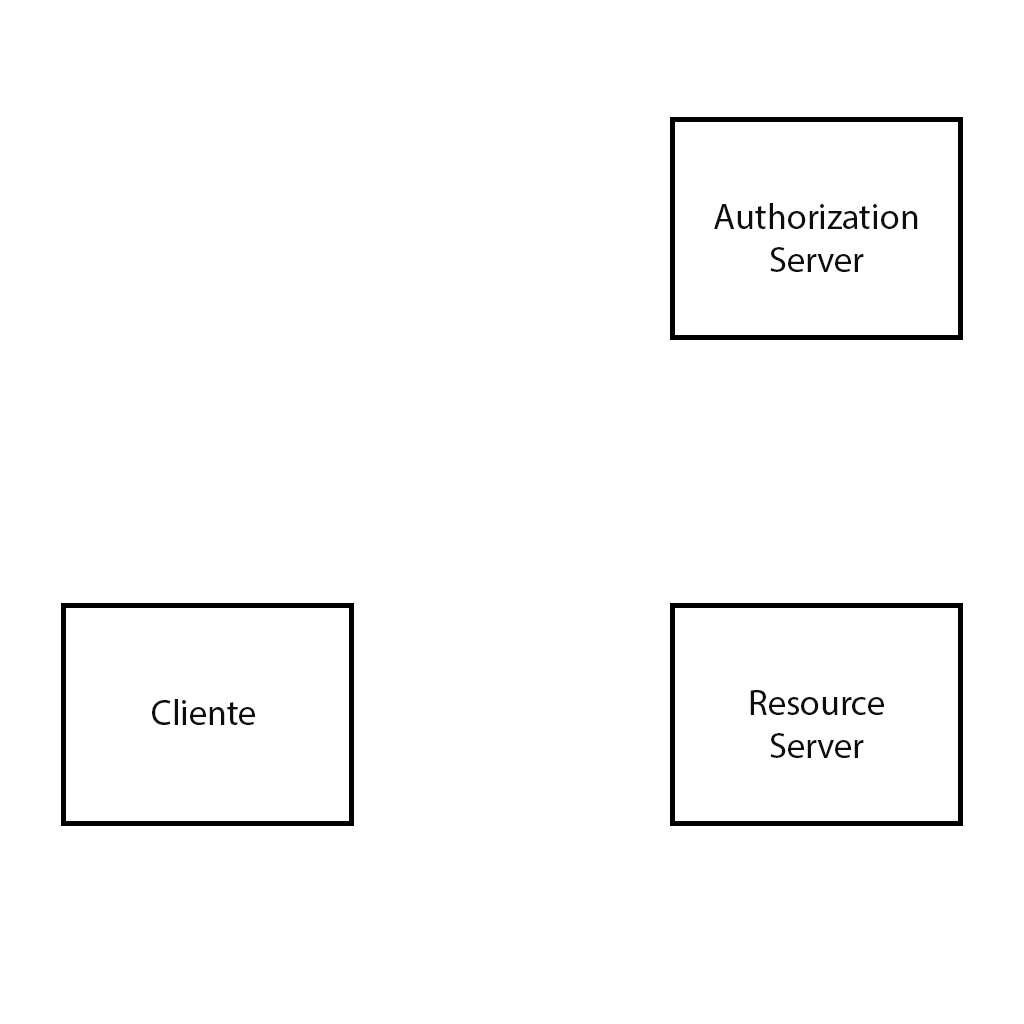
<style>
.page{position:relative;width:1024px;height:1024px;background:#ffffff}
.page>*{position:absolute;margin:0}
.t1{font:36px "MyriadPro-Regular";color:#0d0d0d}
</style>
<div class="page">
<p class="t1" style="left:714px;top:203px;width:204px;height:69px;text-align:center">Authorization<br>Server</p>
<p class="t1" style="left:152px;top:699px;width:103px;height:26px">Cliente</p>
<p class="t1" style="left:750px;top:690px;width:134px;height:68px;text-align:center">Resource<br>Server</p>
</div>
